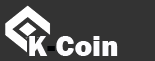
<style>
.page{position:relative;width:155px;height:61px;background:#333333}
.page>*{position:absolute;margin:0}
.t1{font:30px "FranklinGothic-Heavy";color:#fcfcfe}
.t2{font:30px "FranklinGothic-Heavy";color:#000204}
</style>
<div class="page">
<p class="t1" style="left:29px;top:36px;width:89px;height:20px">K<span class="t2">-</span>Coin</p>
</div>
